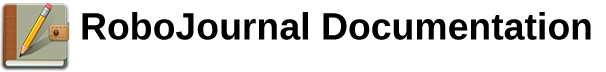
<style>
.page{position:relative;width:606px;height:72px;background:#ffffff}
.page>*{position:absolute;margin:0}
.t1{font:38px "LiberationSansNarrow-Bold";color:#000000;scale:1.2 1}
</style>
<div class="page">
<p class="t1" style="left:82px;top:12px;width:509px;height:28px">RoboJournal Documentation</p>
</div>
